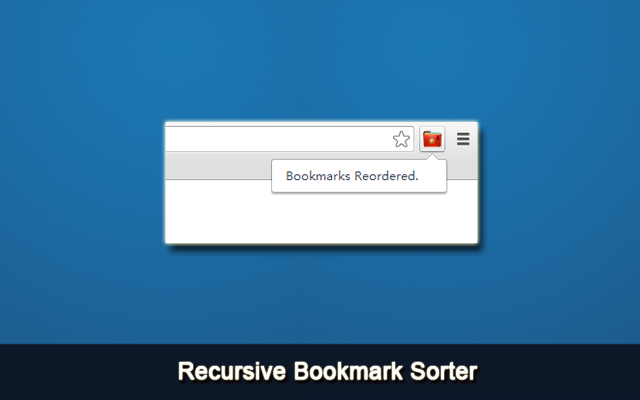
<style>
.page{position:relative;width:640px;height:400px}
.page>*{position:absolute;margin:0}
.t1{font:23.2px "ArialMT";color:#ffffff;font-weight:bold}
</style>
<div class="page">
<p class="t1" style="left:179px;top:362px;width:299px;height:18px">Recursive Bookmark Sorter</p>
</div>
